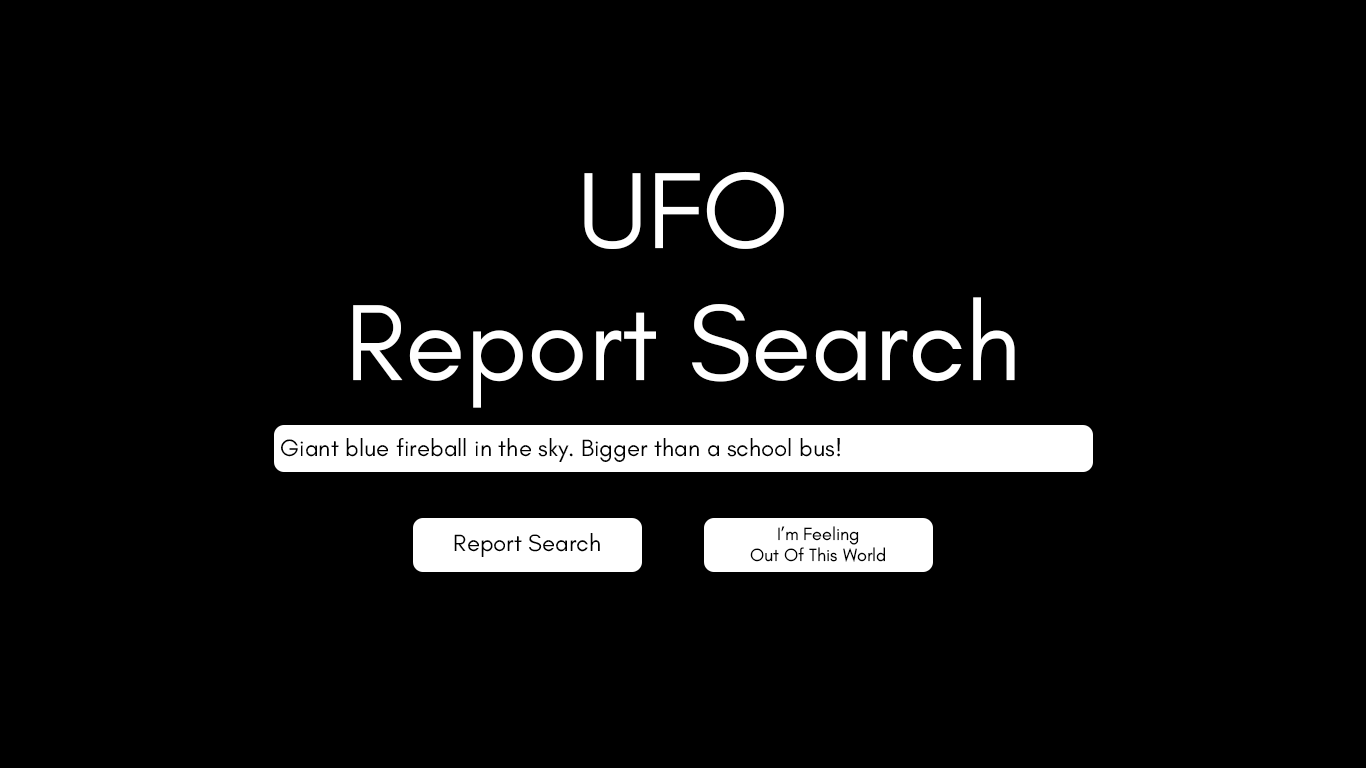
<style>
.page{position:relative;width:1366px;height:768px;background:#000000}
.page>*{position:absolute;margin:0}
.t1{font:110px "GlacialIndifference-Regular";color:#ffffff}
.t2{font:24px "GlacialIndifference-Regular";color:#000000}
.t3{font:18px "GlacialIndifference-Regular";color:#000000}
</style>
<div class="page">
<p class="t1" style="left:353px;top:171px;width:662px;height:237px;text-align:center">UFO<br>Report Search</p>
<p class="t2" style="left:281px;top:438px;width:559px;height:24px">Giant blue fireball in the sky. Bigger than a school bus!</p>
<p class="t2" style="left:454px;top:533px;width:146px;height:24px">Report Search</p>
<p class="t3" style="left:750px;top:526px;width:135px;height:36px;text-align:center">I’m Feeling<br>Out Of This World</p>
</div>
